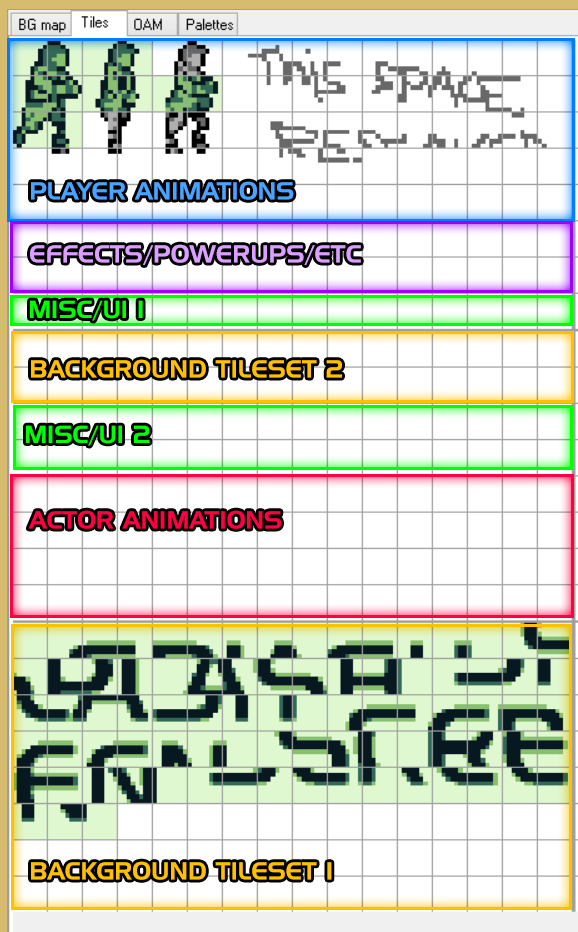
<style>
.page{position:relative;width:578px;height:932px;background:#ffffff}
.page>*{position:absolute;margin:0}
.t1{font:24px "HandelGothicBT-Regular";color:#48a2ff}
.t2{font:24px "HandelGothicBT-Regular";color:#da9fff}
.t3{font:24px "HandelGothicBT-Regular";color:#00ff00}
.t4{font:24px "HandelGothicBT-Regular";color:#ffc000}
.t5{font:24px "HandelGothicBT-Regular";color:#ff0042}
</style>
<div class="page">
<p class="t1" style="left:31px;top:181px;width:263px;height:19px">PLAYER ANIMATIONS</p>
<p class="t2" style="left:30px;top:244px;width:331px;height:21px">EFFECTS/POWERUPS/ETC</p>
<p class="t3" style="left:30px;top:300px;width:113px;height:21px">MISC/UI 1</p>
<p class="t4" style="left:31px;top:359px;width:311px;height:19px">BACKGROUND TILESET 2</p>
<p class="t3" style="left:26px;top:425px;width:124px;height:21px">MISC/UI 2</p>
<p class="t5" style="left:28px;top:510px;width:253px;height:19px">ACTOR ANIMATIONS</p>
<p class="t4" style="left:31px;top:861px;width:301px;height:19px">BACKGROUND TILESET 1</p>
</div>
